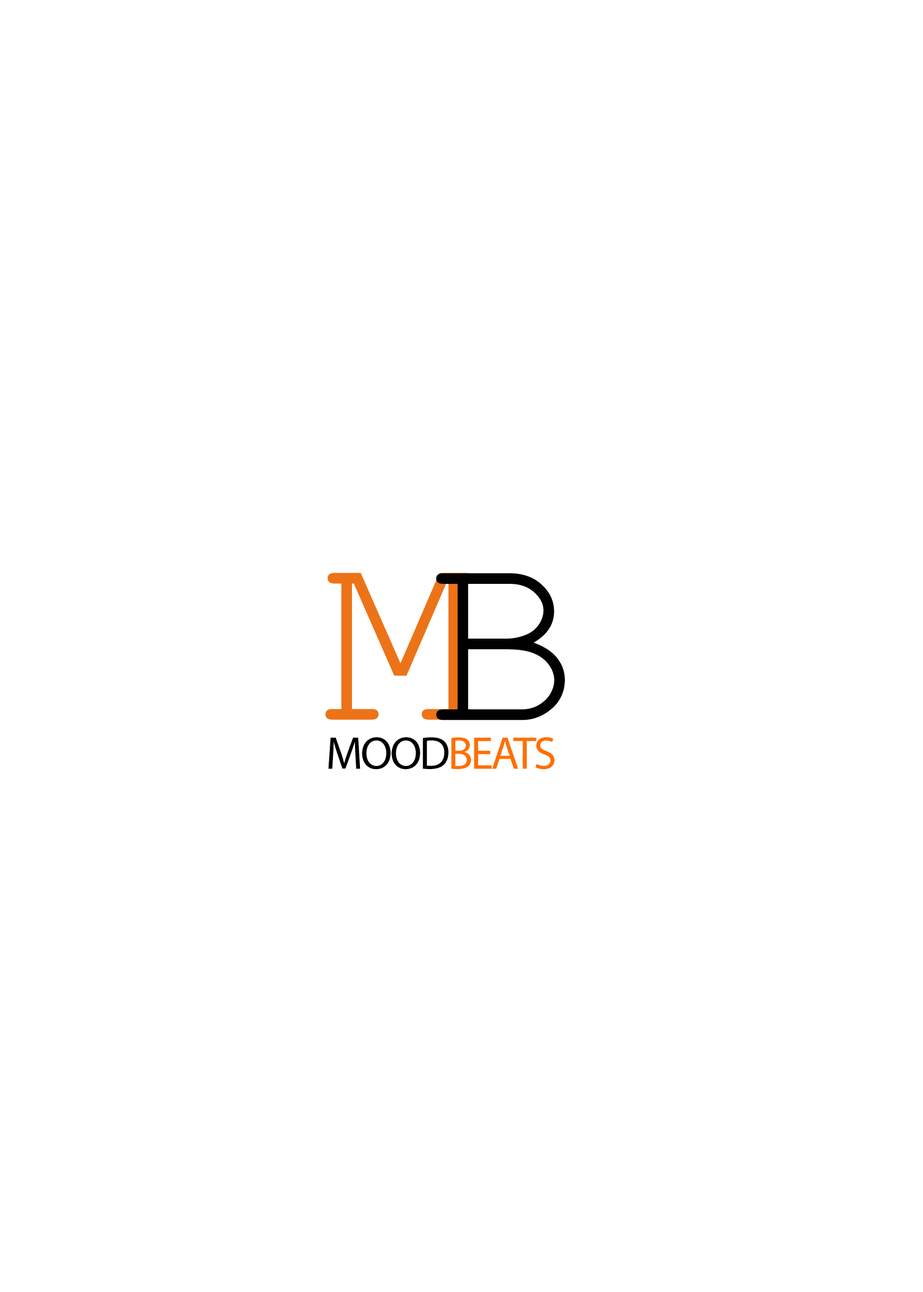
<style>
.page{position:relative;width:923px;height:1292px;background:#ffffff}
.page>*{position:absolute;margin:0}
.t1{font:256.4px "CourierNewPSMT";letter-spacing:-0.05em;color:#ec7317}
.t2{font:256.4px "CourierNewPSMT";letter-spacing:-0.05em;color:#000000}
.t3{font:46.1px "MyriadPro-Regular";letter-spacing:-0.05em;color:#ff6f00}
.t4{font:46.1px "MyriadPro-Regular";letter-spacing:-0.05em;color:#000000}
</style>
<div class="page">
<p class="t1" style="left:325px;top:573px;width:150px;height:147px">M</p>
<p class="t2" style="left:436px;top:573px;width:129px;height:147px">B</p>
<p class="t3" style="left:328px;top:737px;width:226px;height:33px"><span class="t4">MOOD</span>BEATS</p>
</div>
